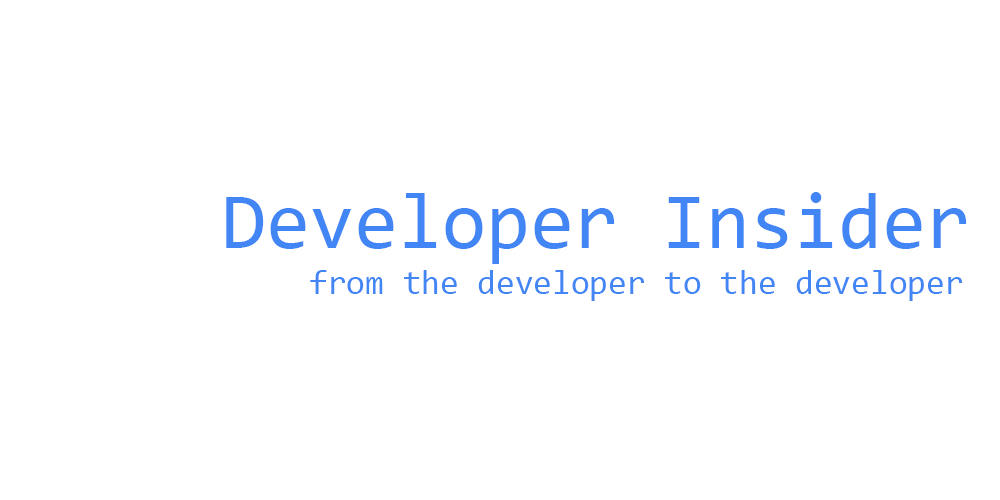
<style>
.page{position:relative;width:1000px;height:500px;background:#ffffff}
.page>*{position:absolute;margin:0}
.t1{font:80px "Consolas";color:#4285f4}
.t2{font:34px "Consolas";color:#4285f4}
</style>
<div class="page">
<p class="t1" style="left:226px;top:192px;width:741px;height:72px">Developer Insider</p>
<p class="t2" style="left:310px;top:270px;width:652px;height:31px">from the developer to the developer</p>
</div>
